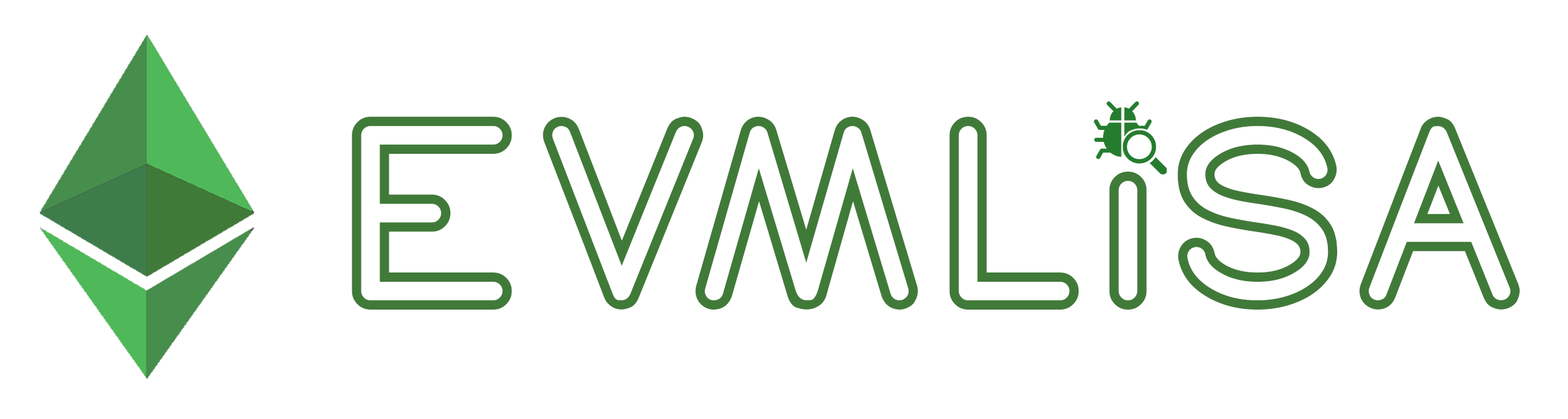
<style>
.page{position:relative;width:1568px;height:419px;background:#ffffff}
.page>*{position:absolute;margin:0}
.t1{font:263.9px "NEONGLOW";letter-spacing:0.05em;color:#407a38}
</style>
<div class="page">
<p class="t1" style="left:352px;top:117px;width:1168px;height:193px">EVMLiSA</p>
</div>
